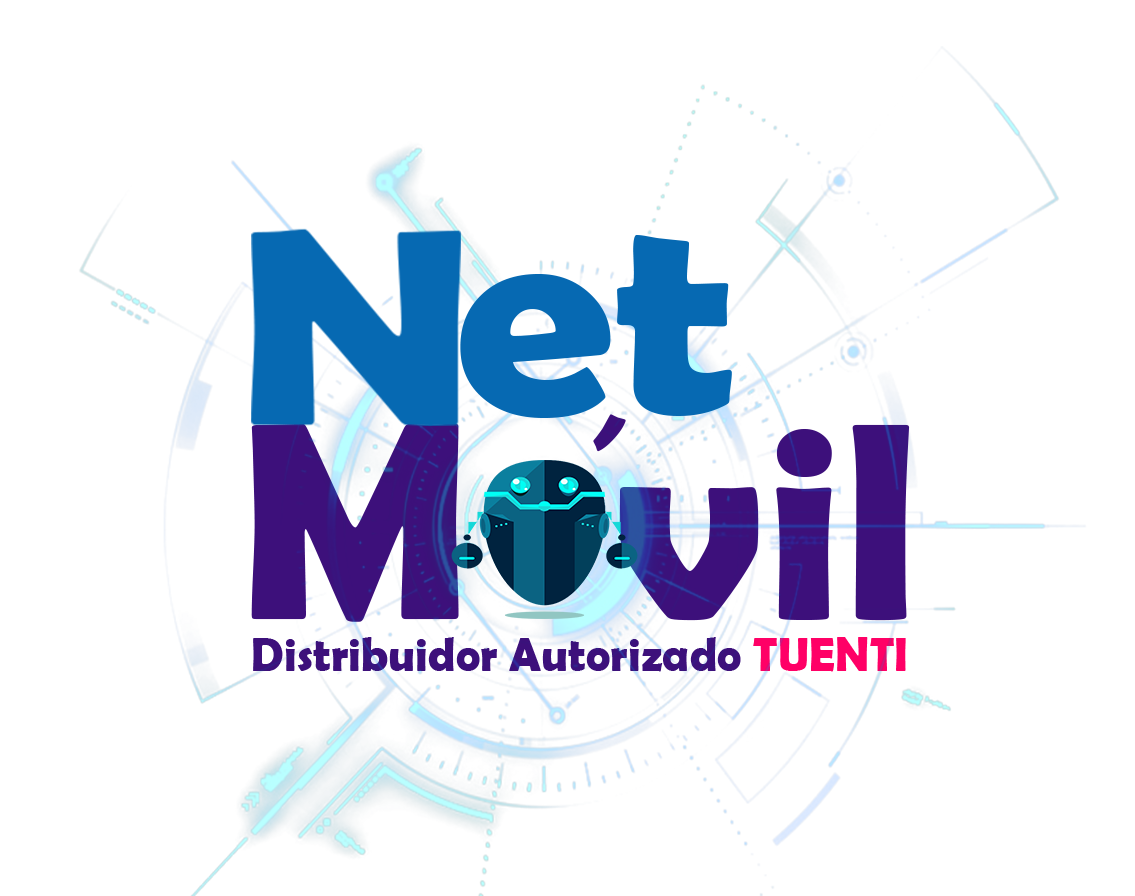
<style>
.page{position:relative;width:1135px;height:896px;background:#ffffff}
.page>*{position:absolute;margin:0}
.t1{font:282.9px "BerlinSansFBDemi-Bold";color:#0669b2;scale:1.13 1}
.t2{font:148.4px "BerlinSansFBDemi-Bold";color:#3d107b;scale:0.86 1}
.t3{font:282.9px "BerlinSansFBDemi-Bold";color:#3d107b}
.t4{font:47.8px "BerlinSansFBDemi-Bold";color:#3d107b}
.t5{font:47.8px "BerlinSansFBDemi-Bold";color:#ff0066}
</style>
<div class="page">
<p class="t1" style="left:460px;top:234px;width:272px;height:184px">et</p>
<p class="t2" style="left:593px;top:414px;width:33px;height:38px;rotate:-22deg">´</p>
<p class="t3" style="left:251px;top:423px;width:659px;height:199px">M  vil</p>
<p class="t4" style="left:253px;top:637px;width:653px;height:35px">Distribuidor Autorizado <span class="t5">TUENTI</span></p>
</div>
